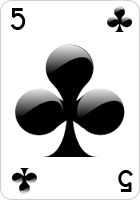
<style>
.page{position:relative;width:140px;height:200px;background:#ffffff}
.page>*{position:absolute;margin:0}
.t1{font:26px "CardCharacters";color:#000000}
</style>
<div class="page">
<p class="t1" style="left:10px;top:8px;width:16px;height:22px">5</p>
<p class="t1" style="left:118px;top:170px;width:15px;height:22px;rotate:180deg">5</p>
</div>
